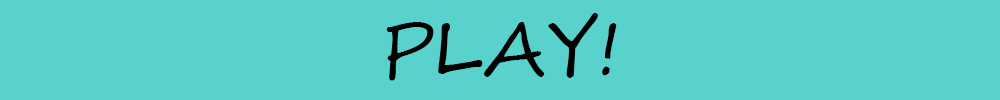
<style>
.page{position:relative;width:1000px;height:100px;background:#59d2ce}
.page>*{position:absolute;margin:0}
.t1{font:74.4px "SegoeScript";color:#000000}
</style>
<div class="page">
<p class="t1" style="left:386px;top:13px;width:231px;height:68px">PLAY!</p>
</div>
